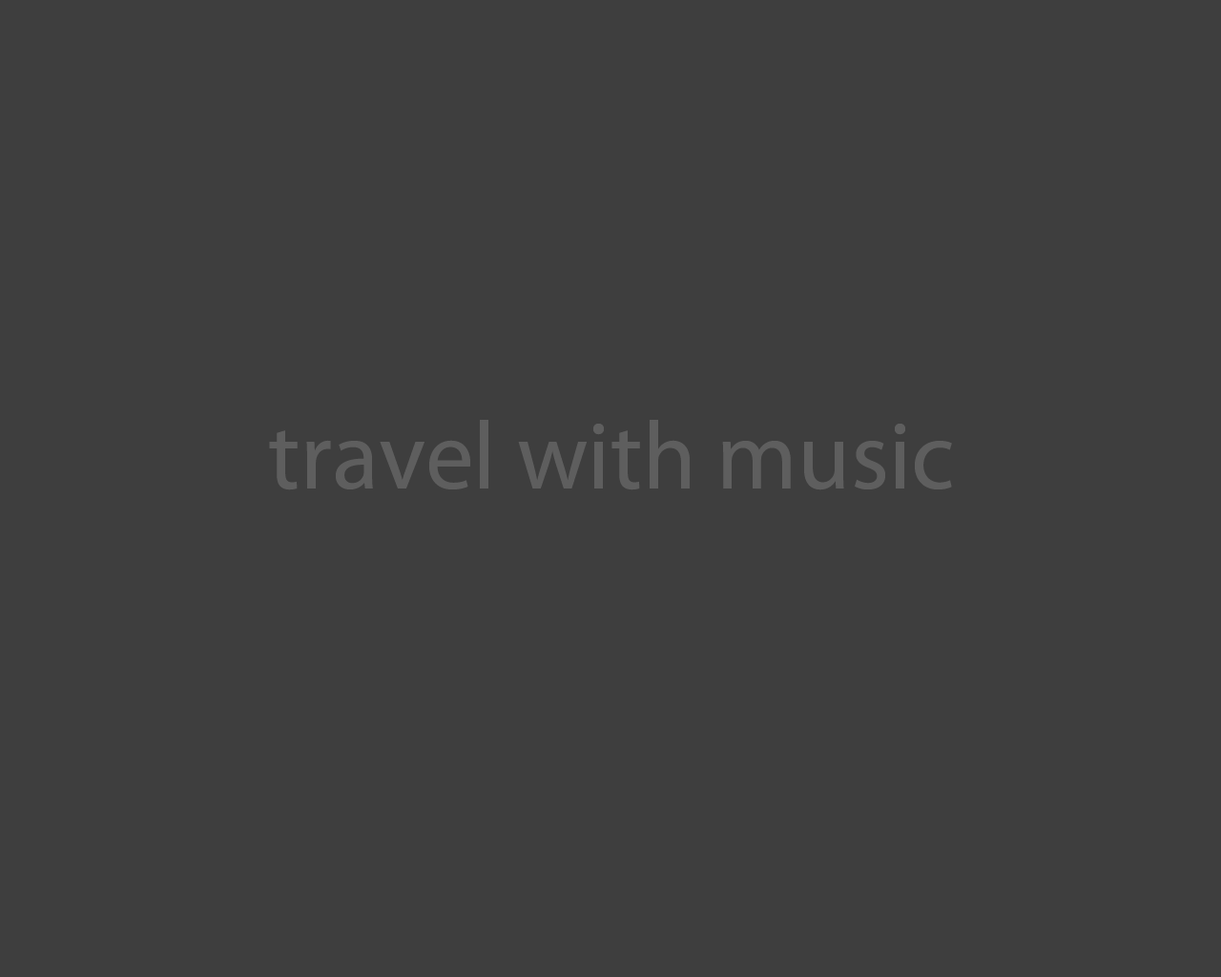
<style>
.page{position:relative;width:1221px;height:977px;background:#3e3e3e}
.page>*{position:absolute;margin:0}
.t1{font:96.6px "MyriadPro-Regular";color:#5e5e5e}
</style>
<div class="page">
<p class="t1" style="left:269px;top:420px;width:683px;height:70px">travel with music</p>
</div>
